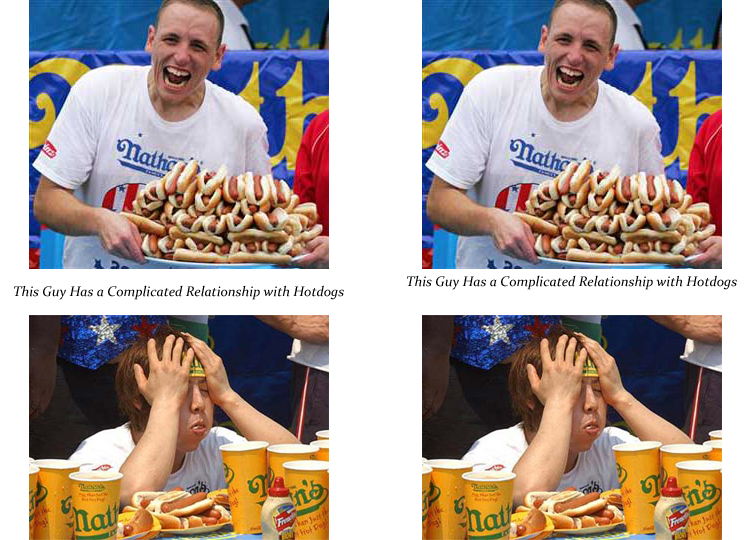
<style>
.page{position:relative;width:749px;height:540px;background:#ffffff}
.page>*{position:absolute;margin:0}
.t1{font:14px "Constantia-Italic";color:#000000}
</style>
<div class="page">
<p class="t1" style="left:407px;top:275px;width:330px;height:15px">This Guy Has a Complicated Relationship with Hotdogs</p>
<p class="t1" style="left:14px;top:285px;width:330px;height:15px">This Guy Has a Complicated Relationship with Hotdogs</p>
</div>
